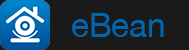
<style>
.page{position:relative;width:189px;height:50px;background:#1a1a1a}
.page>*{position:absolute;margin:0}
.t1{font:33.3px "HelveticaNeue";color:#0066ad}
</style>
<div class="page">
<p class="t1" style="left:72px;top:13px;width:92px;height:24px">eBean</p>
</div>
